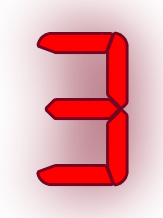
<style>
.page{position:relative;width:163px;height:218px}
.page>*{position:absolute;margin:0}
.t1{font:225.9px "Digital-7";color:#ff0000}
</style>
<div class="page">
<p class="t1" style="left:39px;top:34px;width:87px;height:150px">3</p>
</div>
